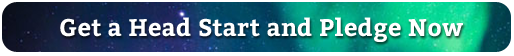
<style>
.page{position:relative;width:514px;height:56px}
.page>*{position:absolute;margin:0}
.t1{font:24px "Bitter-Bold";letter-spacing:0.018em;color:#ffffff}
</style>
<div class="page">
<p class="t1" style="left:60px;top:17px;width:403px;height:25px">Get a Head Start and Pledge Now</p>
</div>
